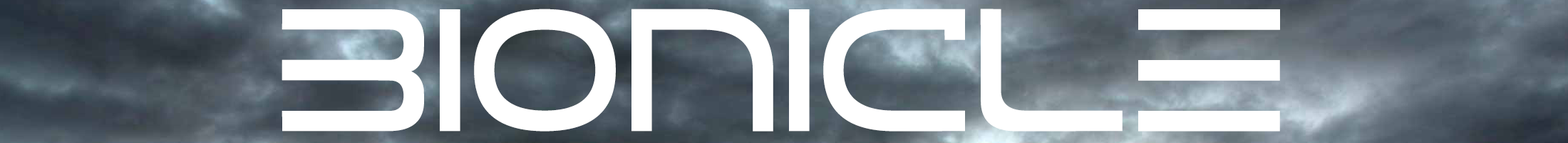
<style>
.page{position:relative;width:1568px;height:143px}
.page>*{position:absolute;margin:0}
.t1{font:156.8px "Tele-Marines";color:#ffffff}
</style>
<div class="page">
<p class="t1" style="left:282px;top:9px;width:998px;height:122px">bionicle</p>
</div>
